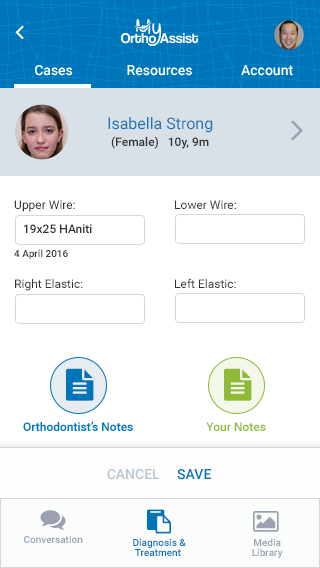
<style>
.page{position:relative;width:320px;height:568px;background:#ffffff}
.page>*{position:absolute;margin:0}
.t1{font:12px/20px "Roboto-Medium";color:#333333}
.t2{font:16px/20px "Roboto-Regular";color:#2073b5}
.t3{font:12px "Roboto-Regular";color:#333333}
.t4{font:12px "Roboto-Medium";color:#333333}
.t5{font:10px "Roboto-Medium";color:#333333}
.t6{font:12px "Roboto-Medium";color:#0074b9}
.t7{font:12px "Roboto-Medium";color:#8eba38}
.t8{font:14px "Roboto-Medium";color:#b9c7d3}
.t9{font:14px "Roboto-Medium";color:#0074b9}
</style>
<div class="page">
<p class="t1" style="left:108px;top:117px;width:105px;height:32px;text-align:center"><span class="t2">Isabella Strong<br></span>(Female)   10y, 9m</p>
<p class="t3" style="left:14px;top:200px;width:61px;height:12px">Upper Wire:</p>
<p class="t3" style="left:175px;top:200px;width:61px;height:9px">Lower Wire:</p>
<p class="t4" style="left:24px;top:224px;width:68px;height:9px">19x25 HAniti</p>
<p class="t5" style="left:14px;top:249px;width:54px;height:10px">4 April 2016</p>
<p class="t3" style="left:15px;top:278px;width:68px;height:13px">Right Elastic:</p>
<p class="t3" style="left:175px;top:278px;width:61px;height:10px">Left Elastic:</p>
<p class="t6" style="left:23px;top:421px;width:110px;height:10px">Orthodontist’s Notes</p>
<p class="t7" style="left:206px;top:422px;width:60px;height:9px">Your Notes</p>
<p class="t8" style="left:107px;top:469px;width:104px;height:11px">CANCEL     <span class="t9">SAVE</span></p>
</div>
